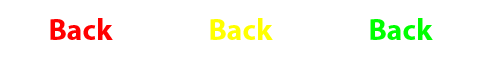
<style>
.page{position:relative;width:480px;height:60px;background:#ffffff}
.page>*{position:absolute;margin:0}
.t1{font:30px "MyriadPro-Bold";color:#ff0000}
.t2{font:30px "MyriadPro-Bold";color:#ffff00}
.t3{font:30px "MyriadPro-Bold";color:#00ff00}
</style>
<div class="page">
<p class="t1" style="left:50px;top:18px;width:63px;height:22px">Back</p>
<p class="t2" style="left:210px;top:18px;width:63px;height:22px">Back</p>
<p class="t3" style="left:370px;top:18px;width:63px;height:22px">Back</p>
</div>
